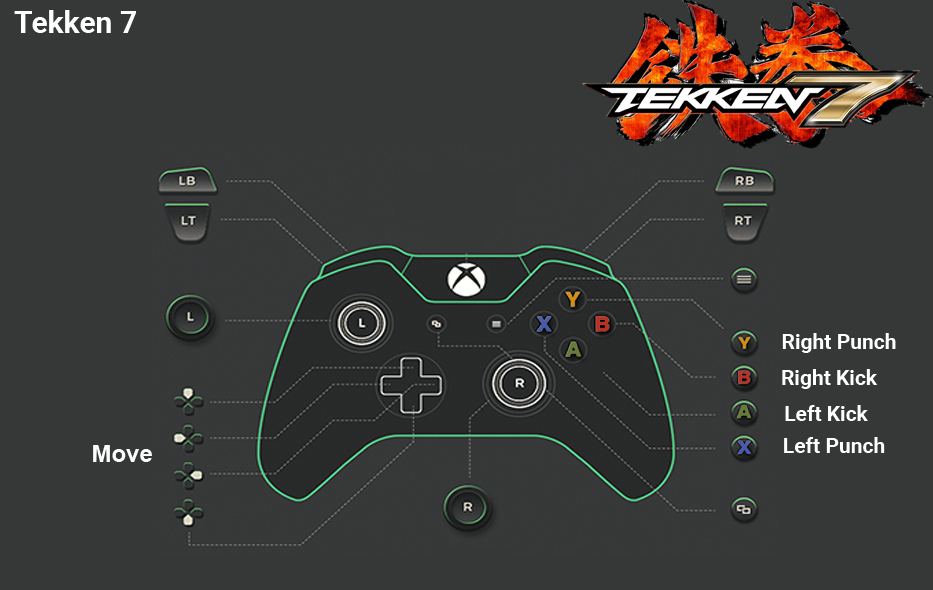
<style>
.page{position:relative;width:933px;height:590px;background:#363838}
.page>*{position:absolute;margin:0}
.t1{font:30px "Roboto-Bold";color:#ffffff}
.t2{font:21px "Roboto-Bold";color:#ffffff}
.t3{font:24px "Arial-BoldMT";color:#fefefe}
</style>
<div class="page">
<p class="t1" style="left:14px;top:10px;width:122px;height:23px">Tekken 7</p>
<p class="t2" style="left:782px;top:333px;width:114px;height:20px">Right Punch</p>
<p class="t2" style="left:782px;top:369px;width:96px;height:20px">Right Kick</p>
<p class="t2" style="left:785px;top:405px;width:83px;height:16px">Left Kick</p>
<p class="t2" style="left:784px;top:437px;width:101px;height:16px">Left Punch</p>
<p class="t3" style="left:93px;top:445px;width:59px;height:17px">Move</p>
</div>
